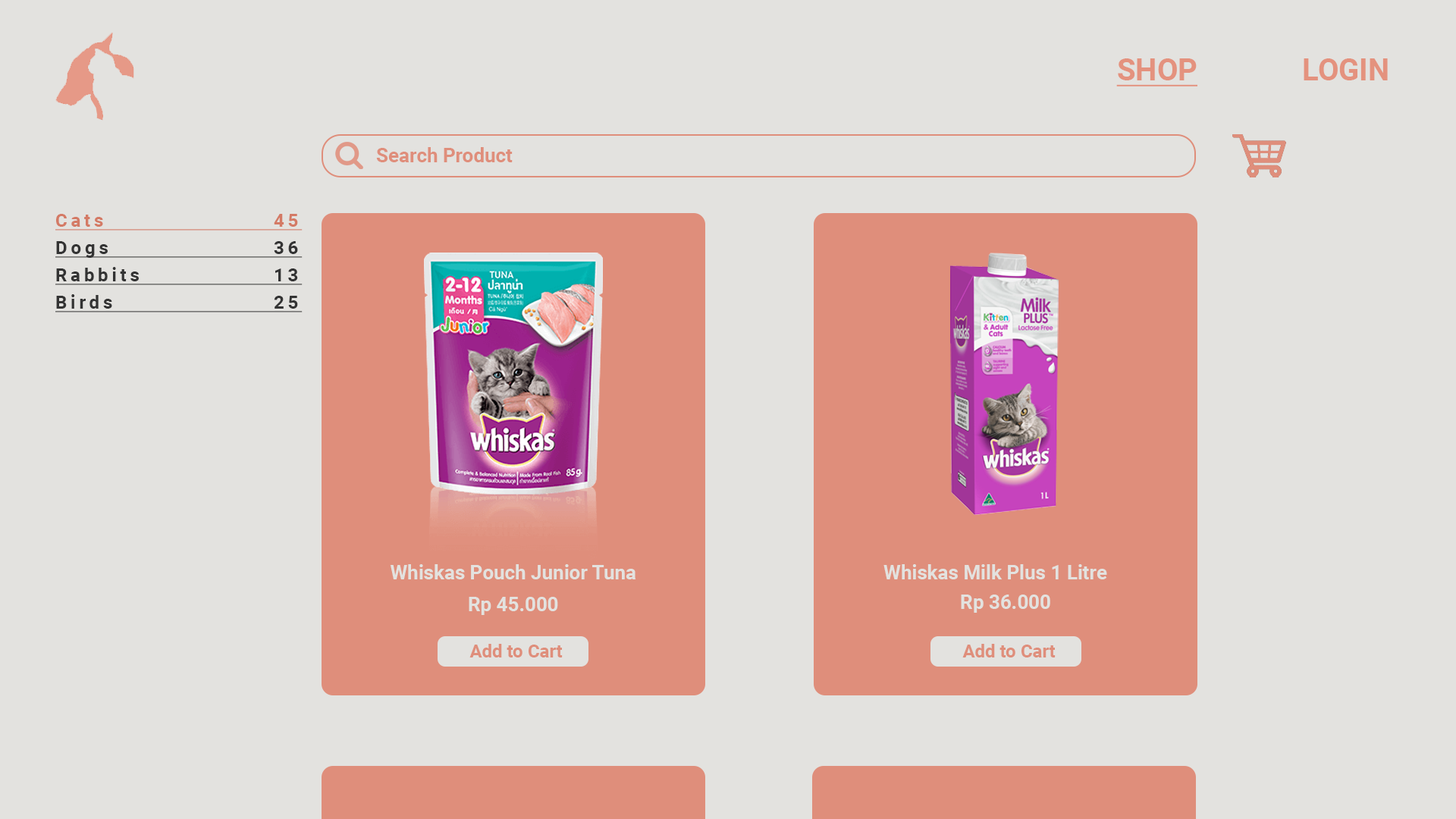
<style>
.page{position:relative;width:1456px;height:819px;background:#e3e2df}
.page>*{position:absolute;margin:0}
.t1{font:30.3px "Roboto-Bold";color:#e4927e;text-decoration:underline}
.t2{font:30.3px "Roboto-Bold";color:#e4927e}
.t3{font:19.7px "Roboto-Bold";color:#df8e7b}
.t4{font:18.2px/27.3px "Roboto-Bold";letter-spacing:0.2em;color:#333333;text-decoration:underline}
.t5{font:18.2px/27.3px "Roboto-Bold";letter-spacing:0.2em;color:#d47a65;text-decoration:underline}
.t6{font:19.7px "Roboto-Bold";color:#e3e2df}
</style>
<div class="page">
<p class="t1" style="left:1116px;top:58px;width:81px;height:28px">SHOP</p>
<p class="t2" style="left:1304px;top:58px;width:84px;height:22px">LOGIN</p>
<p class="t3" style="left:376px;top:147px;width:137px;height:15px">Search Product</p>
<p class="t4" style="left:55px;top:214px;width:248px;height:98px"><span class="t5">Cats       45<br></span>Dogs      36<br>Rabbits     13<br>Birds      25</p>
<p class="t6" style="left:390px;top:564px;width:246px;height:15px">Whiskas Pouch Junior Tuna</p>
<p class="t6" style="left:883px;top:564px;width:224px;height:15px">Whiskas Milk Plus 1 Litre</p>
<p class="t6" style="left:469px;top:597px;width:89px;height:18px">Rp 45.000</p>
<p class="t6" style="left:961px;top:595px;width:89px;height:18px">Rp 36.000</p>
</div>
